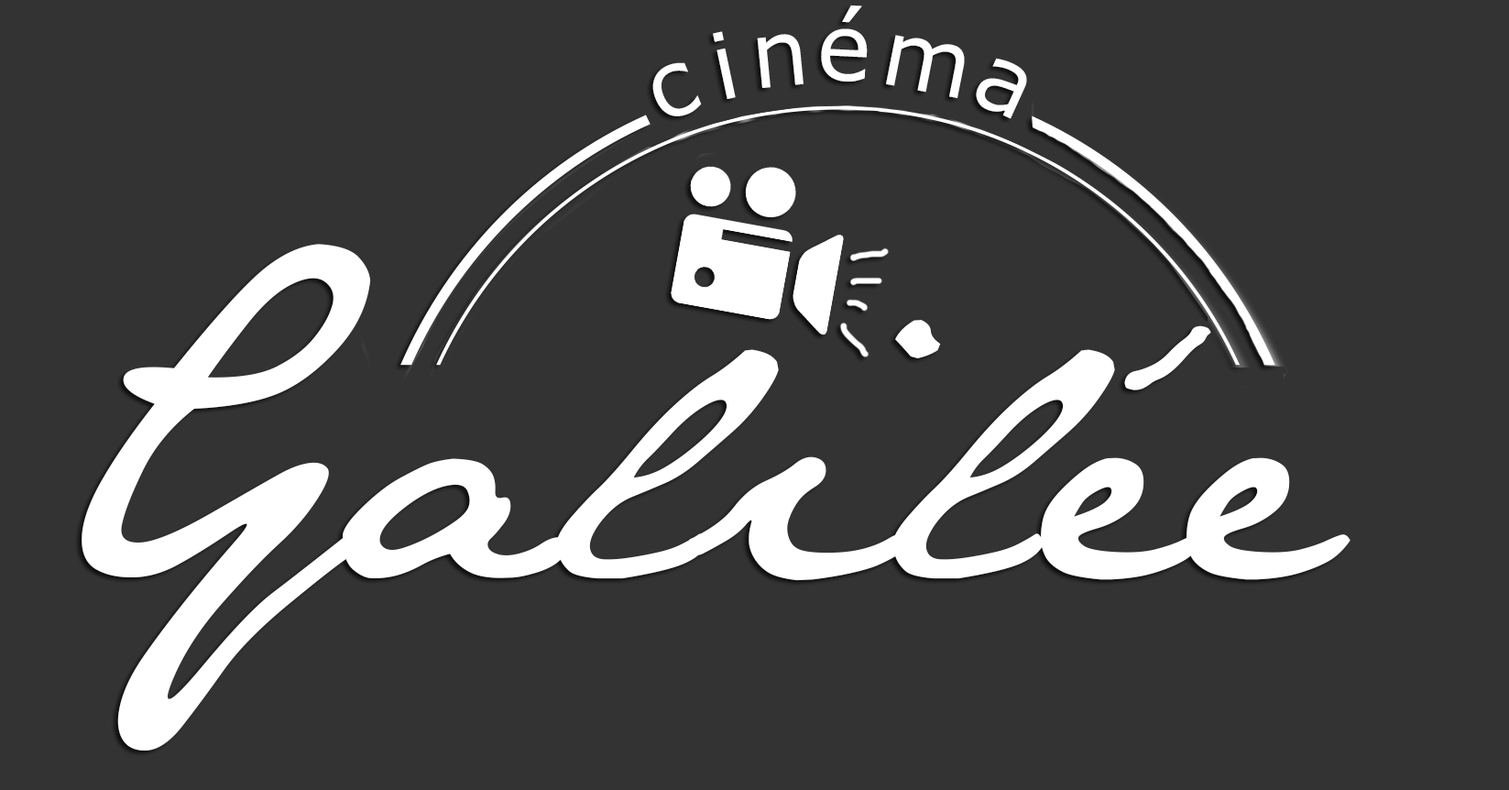
<style>
.page{position:relative;width:1509px;height:790px;background:#333333}
.page>*{position:absolute;margin:0}
.t1{font:91.8px "Verdana";color:#ffffff}
.t2{font:91.6px "Verdana";color:#ffffff}
.t3{font:91.9px "Verdana";color:#ffffff}
.t4{font:91.7px "Verdana";color:#ffffff}
.t5{font:387.5px "JaneAusten";color:#ffffff}
</style>
<div class="page">
<p class="t1" style="left:821px;top:5px;width:47px;height:77px;rotate:3deg">é</p>
<p class="t1" style="left:713px;top:31px;width:23px;height:68px;rotate:-12deg">i</p>
<p class="t1" style="left:757px;top:34px;width:47px;height:54px;rotate:-6deg">n</p>
<p class="t2" style="left:886px;top:35px;width:79px;height:63px;rotate:11deg">m</p>
<p class="t3" style="left:653px;top:62px;width:49px;height:54px;rotate:-22deg">c</p>
<p class="t4" style="left:976px;top:58px;width:51px;height:61px;rotate:25deg">a</p>
<p class="t5" style="left:82px;top:244px;width:1269px;height:507px">Galilée</p>
</div>
